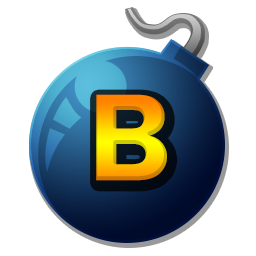
<style>
.page{position:relative;width:256px;height:256px;background:#ffffff}
.page>*{position:absolute;margin:0}
.t1{font:128px "FranklinGothic-Demi"}
</style>
<div class="page">
<p class="t1" style="left:96px;top:94px;width:71px;height:87px">B</p>
</div>
